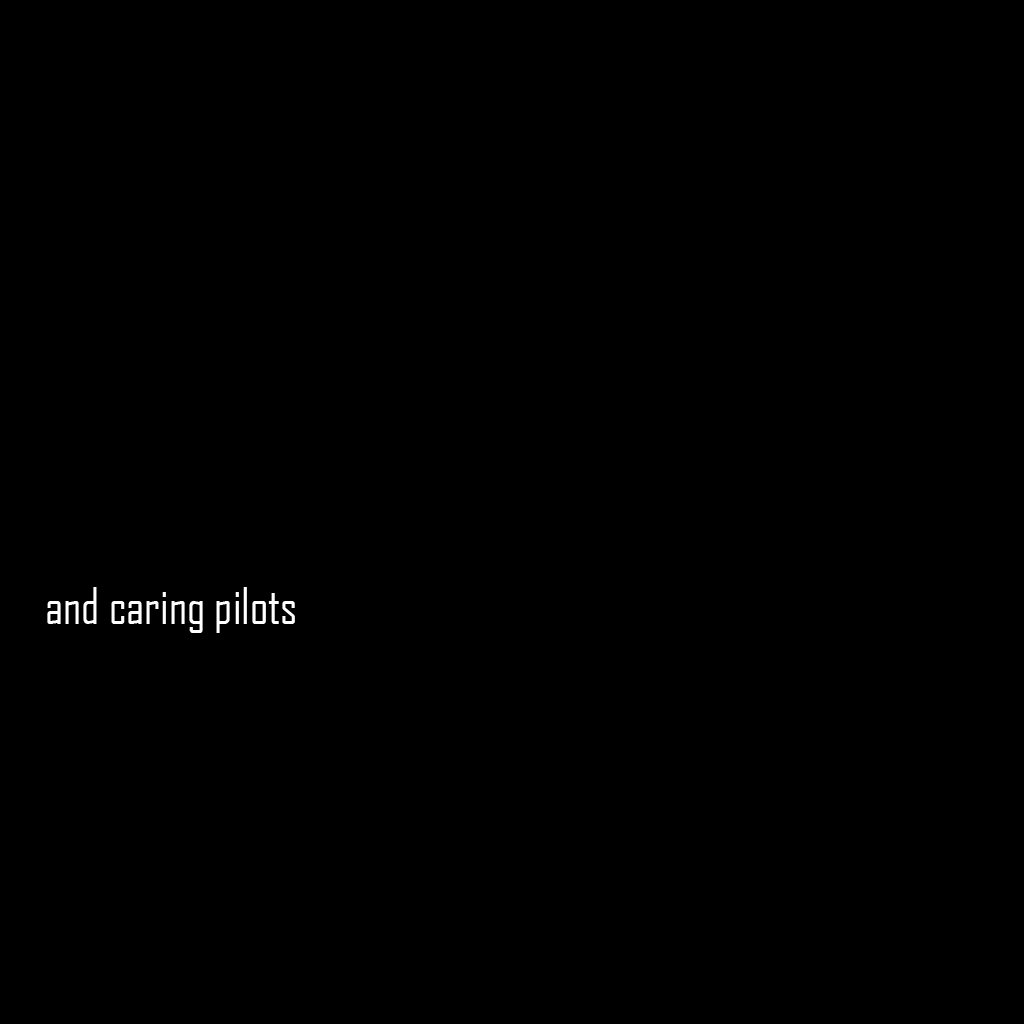
<style>
.page{position:relative;width:1024px;height:1024px;background:#000000}
.page>*{position:absolute;margin:0}
.t1{font:48px "AgencyFBCyrillic";color:#ffffff}
</style>
<div class="page">
<p class="t1" style="left:47px;top:587px;width:248px;height:46px">and caring pilots</p>
</div>
